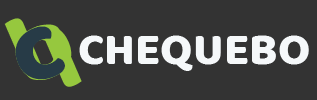
<style>
.page{position:relative;width:317px;height:100px;background:#333333}
.page>*{position:absolute;margin:0}
.t1{font:101.8px "BalooBhai-Regular"}
.t2{font:101.8px "BalooBhai-Regular";color:#273b47}
.t3{font:46.2px "BalooBhai-Regular";color:#f5f8fa}
</style>
<div class="page">
<p class="t1" style="left:4px;top:18px;width:68px;height:62px;rotate:-23deg">b</p>
<p class="t2" style="left:15px;top:26px;width:50px;height:54px;rotate:-22deg">c</p>
<p class="t3" style="left:79px;top:35px;width:230px;height:36px">CHEQUEBO</p>
</div>
